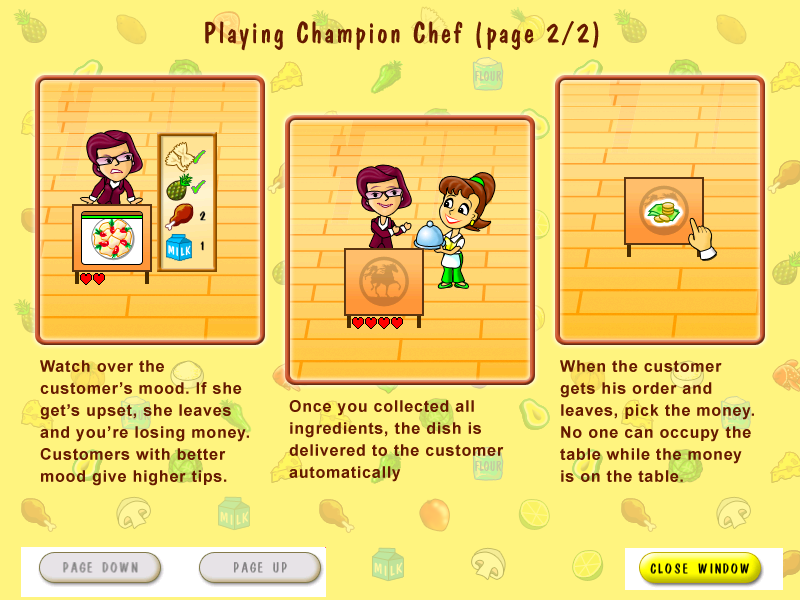
<style>
.page{position:relative;width:800px;height:600px;background:#fff47f}
.page>*{position:absolute;margin:0}
.t1{font:30px "DomCasualBT-Regular";letter-spacing:0.075em;color:#661a00}
.t2{font:16px/22px "Arial-BoldMT";letter-spacing:0.05em;color:#661a00}
</style>
<div class="page">
<p class="t1" style="left:205px;top:21px;width:394px;height:30px">Playing Champion Chef (page 2/2)</p>
<p class="t2" style="left:40px;top:360px;width:209px;height:126px">Watch over the customer’s mood. If she get’s upset, she leaves and you’re losing money. Customers with better mood give higher tips.</p>
<p class="t2" style="left:560px;top:360px;width:194px;height:122px">When the customer gets his order and leaves, pick the money. No one can occupy the table while the money is on the table.</p>
<p class="t2" style="left:289px;top:400px;width:215px;height:82px">Once you collected all ingredients, the dish is delivered to the customer automatically</p>
</div>
